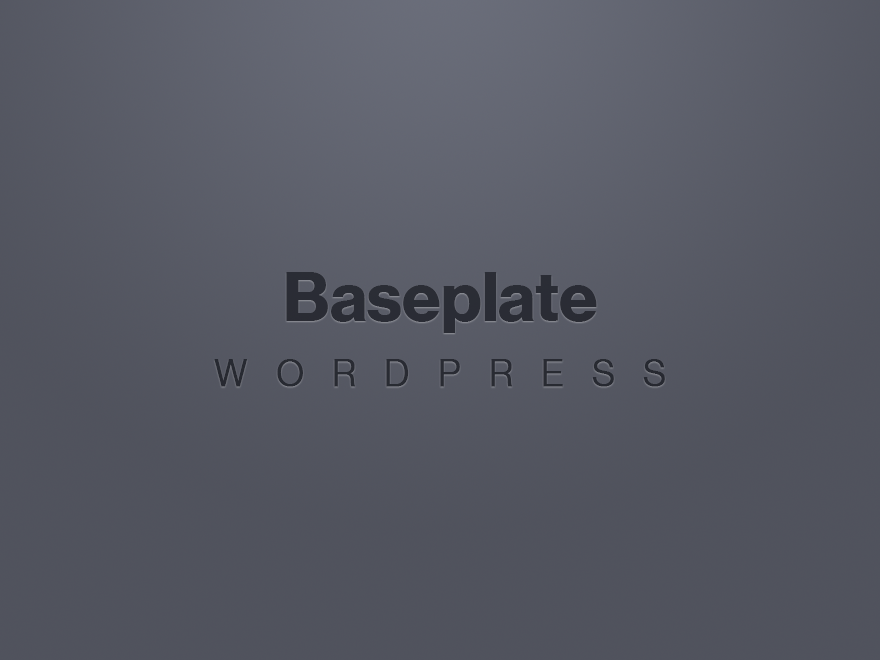
<style>
.page{position:relative;width:880px;height:660px}
.page>*{position:absolute;margin:0}
.t1{font:69.1px "NHaasGroteskDSPro-75Bd";color:#2a2c35}
.t2{font:37.2px/65px "NHaasGroteskDSPro-45Lt";letter-spacing:0.75em;color:#2a2c35;text-transform:uppercase;font-weight:bold}
</style>
<div class="page">
<p class="t1" style="left:214px;top:272px;width:451px;height:115px;text-align:center">Baseplate<br><span class="t2">WordPress</span></p>
</div>
